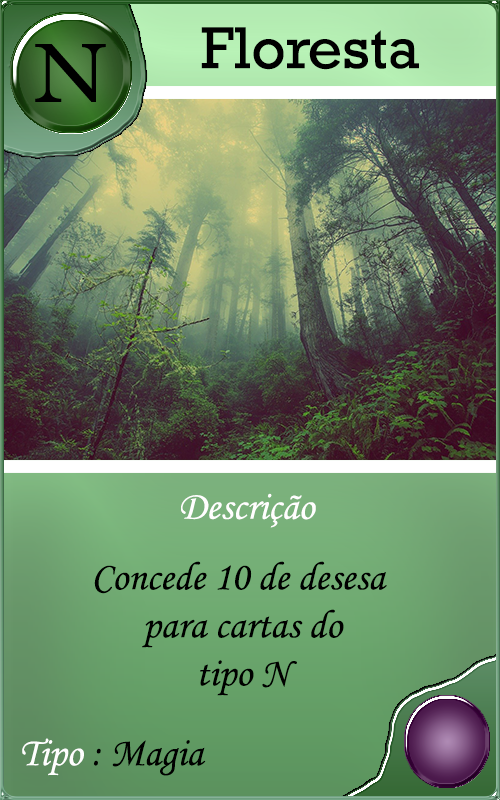
<style>
.page{position:relative;width:500px;height:800px}
.page>*{position:absolute;margin:0}
.t1{font:60px "Rockwell";color:#000000}
.t2{font:40px "MonotypeCorsiva";color:#fffefe}
.t3{font:40px "MonotypeCorsiva";color:#000000}
</style>
<div class="page">
<p class="t1" style="left:201px;top:27px;width:218px;height:43px">Floresta</p>
<p class="t2" style="left:181px;top:493px;width:135px;height:35px">Descrição</p>
<p class="t3" style="left:94px;top:561px;width:293px;height:135px;text-align:center">Concede 10 de desesa <br>para cartas do<br>tipo N</p>
</div>
